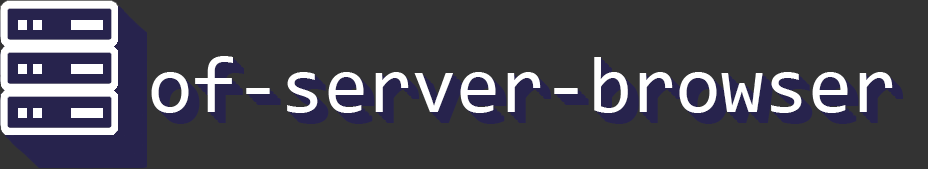
<style>
.page{position:relative;width:928px;height:169px;background:#333333}
.page>*{position:absolute;margin:0}
.t1{font:80px "Consolas";color:#ffffff}
</style>
<div class="page">
<p class="t1" style="left:151px;top:56px;width:742px;height:57px">of-server-browser</p>
</div>
